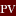
<style>
.page{position:relative;width:16px;height:16px;background:#630000}
.page>*{position:absolute;margin:0}
.t1{font:12px "BaskOldFace";color:#ffffff}
</style>
<div class="page">
<p class="t1" style="left:0px;top:5px;width:16px;height:8px">PV</p>
</div>
